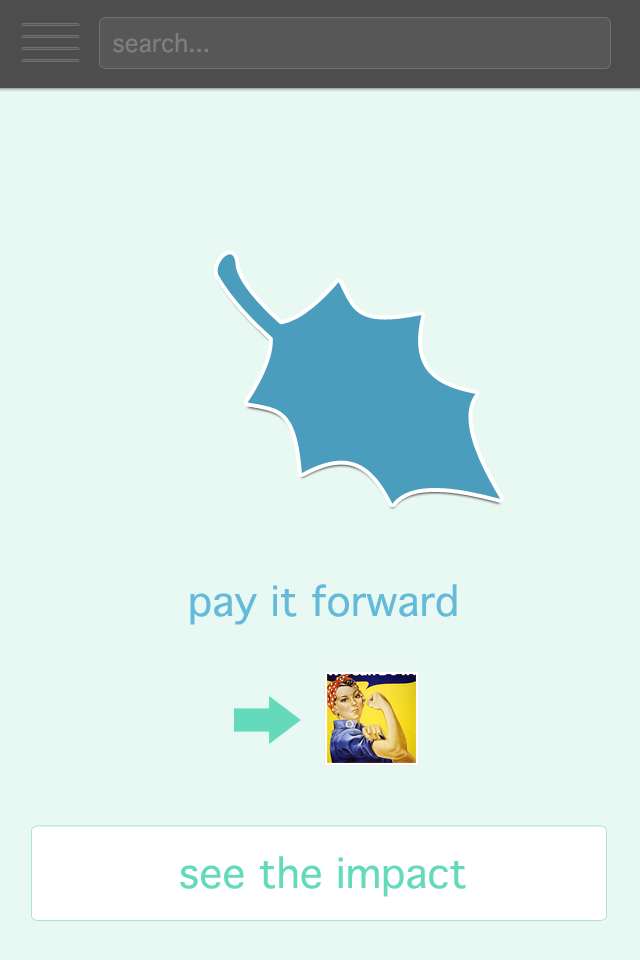
<style>
.page{position:relative;width:640px;height:960px;background:#e8f8f3}
.page>*{position:absolute;margin:0}
.t1{font:24px "Thonburi";color:#7e7e7e}
.t2{font:40px "Thonburi";color:#65bada}
.t3{font:40px "Thonburi";color:#65daba}
</style>
<div class="page">
<p class="t1" style="left:113px;top:33px;width:95px;height:20px">search...</p>
<p class="t2" style="left:190px;top:584px;width:267px;height:41px">pay it forward</p>
<p class="t3" style="left:180px;top:856px;width:286px;height:41px">see the impact</p>
</div>
